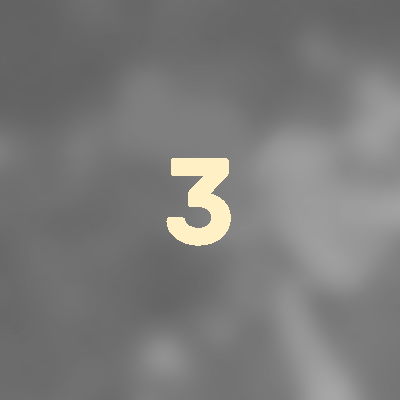
<style>
.page{position:relative;width:400px;height:400px}
.page>*{position:absolute;margin:0}
.t1{font:131.5px "Archive-Regular";color:#fff1c5}
</style>
<div class="page">
<p class="t1" style="left:166px;top:158px;width:65px;height:88px">3</p>
</div>
